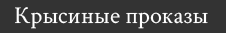
<style>
.page{position:relative;width:226px;height:33px;background:#333333}
.page>*{position:absolute;margin:0}
.t1{font:24px "CrimsonText-Regular";color:#ffffff}
</style>
<div class="page">
<p class="t1" style="left:15px;top:7px;width:193px;height:22px">Крысиные проказы</p>
</div>
